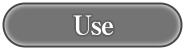
<style>
.page{position:relative;width:185px;height:50px;background:#747474}
.page>*{position:absolute;margin:0}
.t1{font:26px "RyuminPro-ExBold";letter-spacing:-0.04em;color:#ffffff}
</style>
<div class="page">
<p class="t1" style="left:73px;top:15px;width:40px;height:20px">Use</p>
</div>
